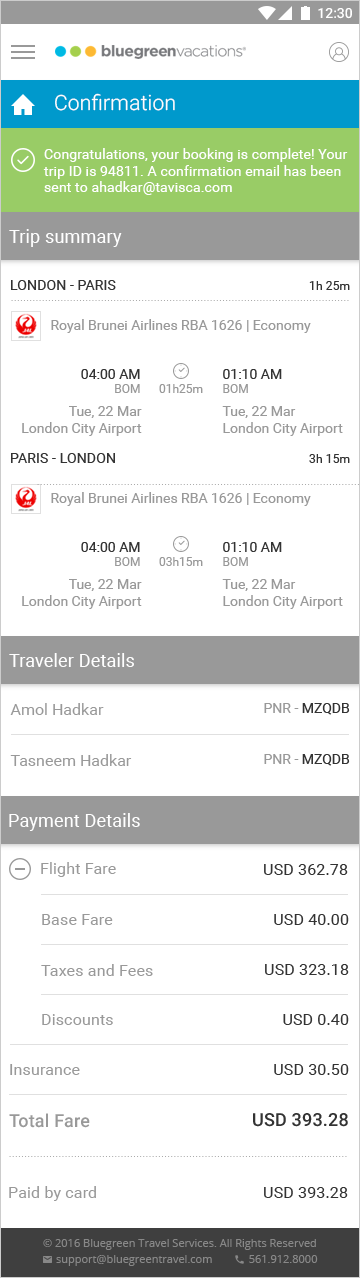
<style>
.page{position:relative;width:360px;height:1278px;background:#ffffff}
.page>*{position:absolute;margin:0}
.t1{font:21px "Roboto-Light";letter-spacing:0.01em;color:#ffffff}
.t2{font:14px "Roboto-Regular";letter-spacing:0.01em;color:#ffffff}
.t3{font:18px "Roboto-Regular";letter-spacing:0.01em;color:#ffffff}
.t4{font:14px "Roboto-Regular";letter-spacing:0.01em;color:#333333;text-transform:uppercase}
.t5{font:12px "Roboto-Regular";letter-spacing:0.01em;color:#333333}
.t6{font:14px "Roboto-Regular";color:#999999}
.t7{font:14px "Roboto-Regular";color:#333333}
.t8{font:12px "Roboto-Regular";color:#999999}
.t9{font:16px "Roboto-Regular";color:#999999}
.t10{font:16px "Roboto-Regular";letter-spacing:0.01em;color:#999999}
.t11{font:16px "Roboto-Regular";letter-spacing:0.01em;color:#333333}
.t12{font:18px "Roboto-Medium";letter-spacing:0.01em;color:#999999}
.t13{font:18px "Roboto-Medium";letter-spacing:0.01em;color:#333333}
</style>
<div class="page">
<p class="t1" style="left:55px;top:93px;width:120px;height:18px">Confirmation</p>
<p class="t2" style="left:43px;top:148px;width:305px;height:47px">Congratulations, your booking is complete! Your trip ID is 94811. A confirmation email has been sent to ahadkar@tavisca.com</p>
<p class="t3" style="left:9px;top:229px;width:113px;height:18px">Trip summary</p>
<p class="t4" style="left:11px;top:280px;width:105px;height:10px">london - paris</p>
<p class="t5" style="left:309px;top:281px;width:41px;height:9px">1h 25m</p>
<p class="t6" style="left:51px;top:319px;width:260px;height:14px">Royal Brunei Airlines RBA 1626 | Economy</p>
<p class="t7" style="left:81px;top:369px;width:59px;height:24px;text-align:right">04:00 AM<br><span class="t8">BOM</span></p>
<p class="t7" style="left:223px;top:369px;width:59px;height:24px">01:10 AM<br><span class="t8">BOM</span></p>
<p class="t8" style="left:159px;top:384px;width:44px;height:9px">01h25m</p>
<p class="t6" style="left:22px;top:406px;width:120px;height:30px;text-align:right">Tue, 22 Mar<br>London City Airport</p>
<p class="t6" style="left:222px;top:406px;width:121px;height:30px">Tue, 22 Mar<br>London City Airport</p>
<p class="t4" style="left:11px;top:453px;width:104px;height:10px">paris - london</p>
<p class="t5" style="left:309px;top:454px;width:41px;height:9px">3h 15m</p>
<p class="t6" style="left:51px;top:492px;width:260px;height:14px">Royal Brunei Airlines RBA 1626 | Economy</p>
<p class="t7" style="left:81px;top:542px;width:59px;height:24px;text-align:right">04:00 AM<br><span class="t8">BOM</span></p>
<p class="t7" style="left:223px;top:542px;width:59px;height:24px">01:10 AM<br><span class="t8">BOM</span></p>
<p class="t8" style="left:159px;top:557px;width:44px;height:9px">03h15m</p>
<p class="t6" style="left:22px;top:579px;width:120px;height:30px;text-align:right">Tue, 22 Mar<br>London City Airport</p>
<p class="t6" style="left:222px;top:579px;width:121px;height:30px">Tue, 22 Mar<br>London City Airport</p>
<p class="t3" style="left:9px;top:653px;width:125px;height:14px">Traveler Details</p>
<p class="t9" style="left:10px;top:703px;width:94px;height:12px">Amol Hadkar</p>
<p class="t6" style="left:264px;top:703px;width:86px;height:12px">PNR - <span class="t7">MZQDB</span></p>
<p class="t9" style="left:10px;top:754px;width:122px;height:12px">Tasneem Hadkar</p>
<p class="t6" style="left:264px;top:754px;width:86px;height:12px">PNR - <span class="t7">MZQDB</span></p>
<p class="t3" style="left:9px;top:813px;width:131px;height:18px">Payment Details</p>
<p class="t10" style="left:41px;top:862px;width:75px;height:15px">Flight Fare</p>
<p class="t11" style="left:264px;top:864px;width:84px;height:11px">USD 362.78</p>
<p class="t10" style="left:42px;top:914px;width:71px;height:11px">Base Fare</p>
<p class="t11" style="left:274px;top:914px;width:75px;height:11px">USD 40.00</p>
<p class="t10" style="left:41px;top:964px;width:112px;height:12px">Taxes and Fees</p>
<p class="t11" style="left:265px;top:964px;width:84px;height:11px">USD 323.18</p>
<p class="t10" style="left:42px;top:1014px;width:71px;height:11px">Discounts</p>
<p class="t11" style="left:283px;top:1014px;width:66px;height:11px">USD 0.40</p>
<p class="t10" style="left:10px;top:1064px;width:70px;height:11px">Insurance</p>
<p class="t11" style="left:274px;top:1064px;width:75px;height:11px">USD 30.50</p>
<p class="t12" style="left:9px;top:1113px;width:81px;height:15px">Total Fare</p>
<p class="t13" style="left:253px;top:1113px;width:95px;height:14px">USD 393.28</p>
<p class="t10" style="left:9px;top:1186px;width:87px;height:15px">Paid by card</p>
<p class="t11" style="left:264px;top:1187px;width:84px;height:11px">USD 393.28</p>
</div>
